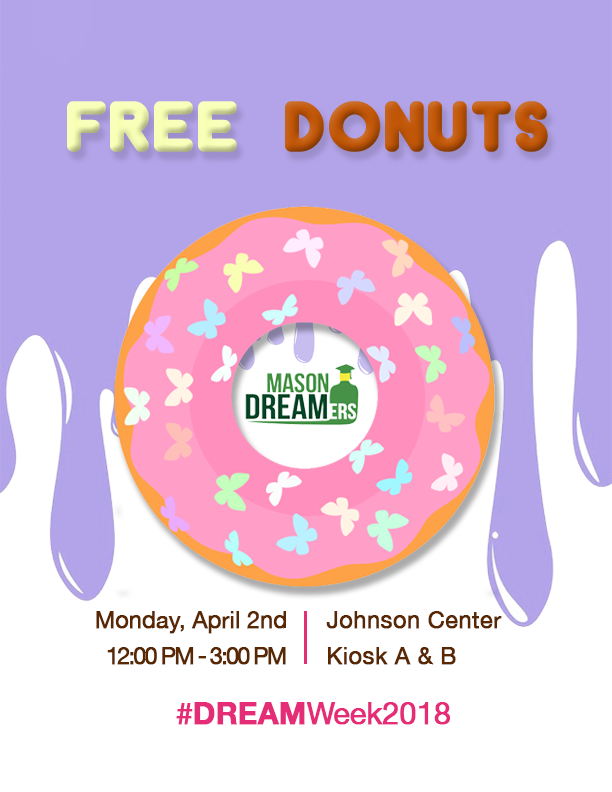
<style>
.page{position:relative;width:612px;height:792px;background:#ffffff}
.page>*{position:absolute;margin:0}
.t1{font:23.6px/36px "HelveticaNeue";letter-spacing:-0.1em;color:#592701;font-weight:bold}
.t2{font:23.6px/36px "HelveticaNeue";letter-spacing:-0.02em;color:#592701;font-weight:bold}
.t3{font:23.6px/36px "HelveticaNeue";color:#592701;font-weight:bold}
.t4{font:30.7px "HelveticaNeue";letter-spacing:-0.02em;color:#e52c77;font-weight:bold}
.t5{font:30.7px "HelveticaNeue-Bold";letter-spacing:-0.02em;color:#e52c77;font-weight:bold}
</style>
<div class="page">
<p class="t1" style="left:96px;top:611px;width:190px;height:54px;text-align:right"><span class="t2">Monday, April 2nd<br></span>12:00 PM - 3:00 PM</p>
<p class="t3" style="left:326px;top:611px;width:176px;height:54px">Johnson Center<br>Kiosk A &amp; B</p>
<p class="t4" style="left:176px;top:702px;width:275px;height:23px">#<span class="t5">DREAM</span>Week2018</p>
</div>
